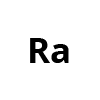
<style>
.page{position:relative;width:100px;height:100px;background:#ffffff}
.page>*{position:absolute;margin:0}
.t1{font:35px "OpenSans-Bold";color:#000000}
</style>
<div class="page">
<p class="t1" style="left:30px;top:38px;width:39px;height:25px">Ra</p>
</div>
